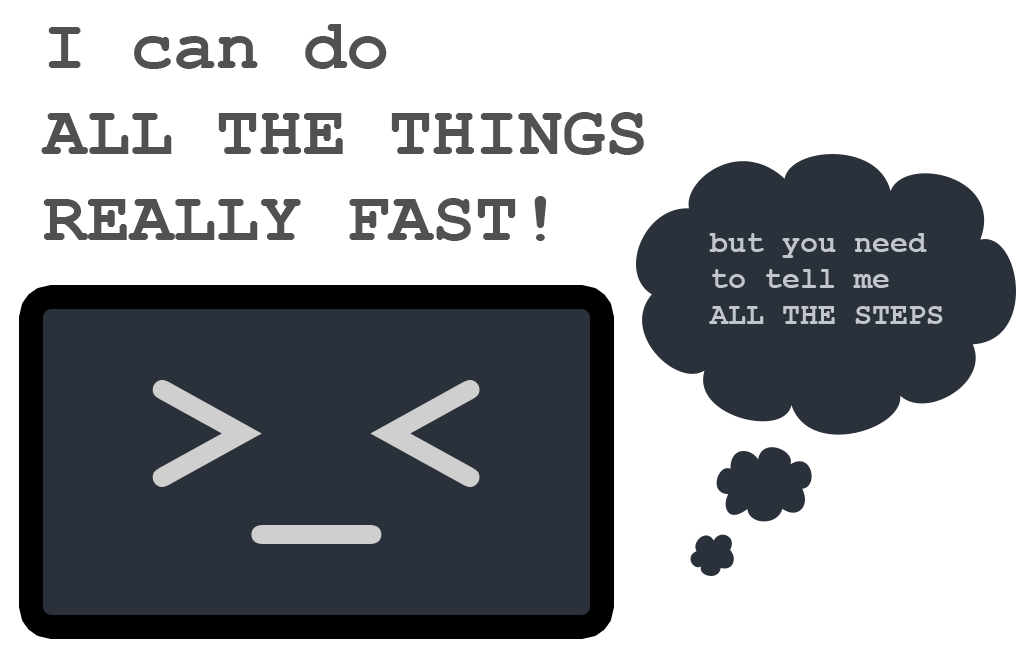
<style>
.page{position:relative;width:1024px;height:665px;background:#ffffff}
.page>*{position:absolute;margin:0}
.t1{font:72px "CourierNewPS-BoldMT";color:#515151}
.t2{font:30px "CourierNewPS-BoldMT";color:#c0c5ce}
.t3{font:190px "CourierNewPS-BoldMT";color:#cfcfcf}
</style>
<div class="page">
<p class="t1" style="left:41px;top:24px;width:603px;height:217px">I can do <br>ALL THE THINGS<br>REALLY FAST!</p>
<p class="t2" style="left:709px;top:233px;width:234px;height:91px">but you need <br>to tell me <br>ALL THE STEPS</p>
<p class="t3" style="left:152px;top:380px;width:328px;height:164px">&gt;_&lt;</p>
</div>
